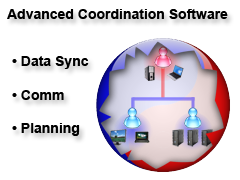
<style>
.page{position:relative;width:240px;height:180px;background:#ffffff}
.page>*{position:absolute;margin:0}
.t1{font:14px "Arial-BoldMT";color:#000000}
</style>
<div class="page">
<p class="t1" style="left:7px;top:9px;width:221px;height:10px">Advanced Coordination Software</p>
<p class="t1" style="left:12px;top:56px;width:77px;height:80px">• Data Sync<br><br>• Comm<br><br>• Planning</p>
</div>
